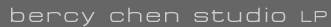
<style>
.page{position:relative;width:331px;height:27px;background:#666666}
.page>*{position:absolute;margin:0}
.t1{font:18px "SpaceOut";letter-spacing:0.2em;color:#cccccc}
.t2{font:14px "SpaceOut";letter-spacing:0.2em;color:#cccccc}
</style>
<div class="page">
<p class="t1" style="left:11px;top:7px;width:316px;height:20px">bercy chen studio <span class="t2">LP</span></p>
</div>
